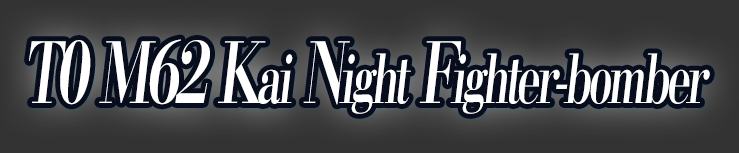
<style>
.page{position:relative;width:739px;height:153px}
.page>*{position:absolute;margin:0}
.t1{font:67.2px "KochoStd-Heavy";letter-spacing:-0.08em;color:#ffffff;font-style:italic;scale:0.65 1}
.t2{font:84px "KochoStd-Heavy";letter-spacing:-0.08em;color:#ffffff;font-style:italic;scale:0.65 1}
</style>
<div class="page">
<p class="t1" style="left:29px;top:39px;width:681px;height:75px"><span class="t2">T0 M62 K</span>ai<span class="t2"> N</span>ight<span class="t2"> F</span>ighter-bomber</p>
</div>
